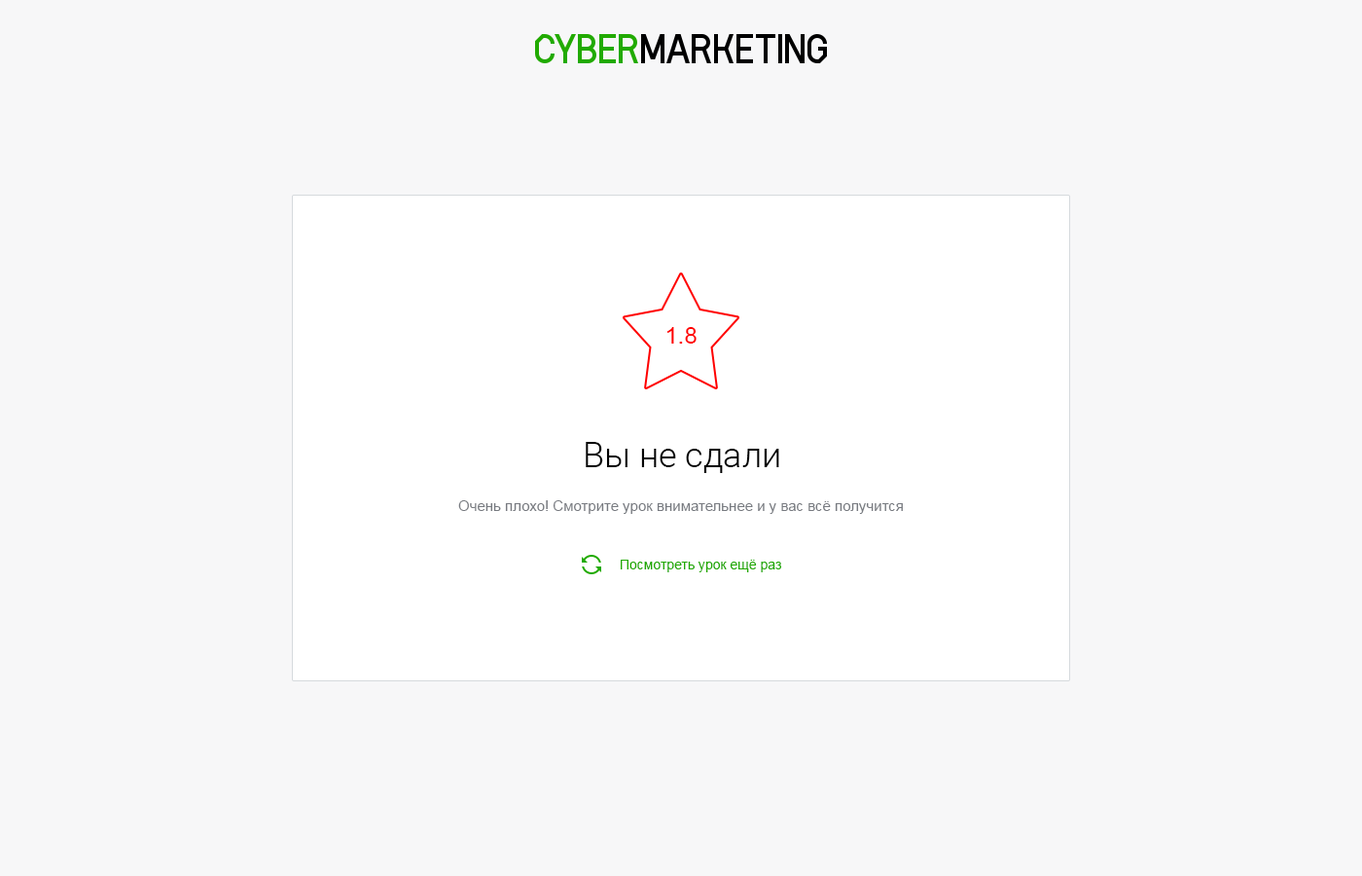
<style>
.page{position:relative;width:1362px;height:876px;background:#f7f7f8}
.page>*{position:absolute;margin:0}
.t1{font:23.3px "ArialMT";color:#ff0000}
.t2{font:35px "Roboto-Light";color:#000000}
.t3{font:14.6px "ArialMT";color:#787b81}
.t4{font:13.6px "ArialMT";color:#21aa00}
</style>
<div class="page">
<p class="t1" style="left:667px;top:327px;width:30px;height:16px">1.8</p>
<p class="t2" style="left:586px;top:442px;width:193px;height:31px">Вы не сдали</p>
<p class="t3" style="left:458px;top:500px;width:445px;height:14px">Очень плохо! Смотрите урок внимательнее и у вас всё получится</p>
<p class="t4" style="left:621px;top:559px;width:160px;height:13px">Посмотреть урок ещё раз</p>
</div>
